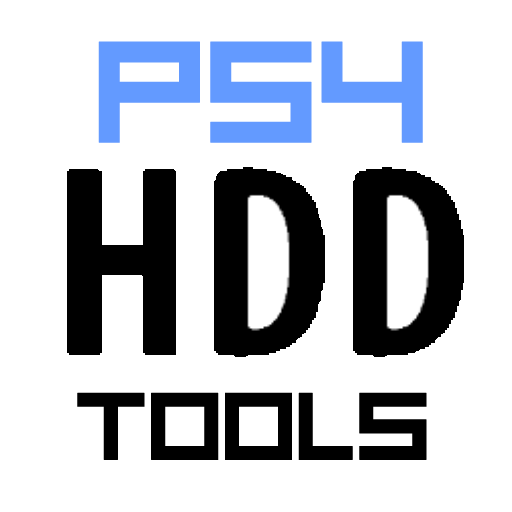
<style>
.page{position:relative;width:512px;height:512px;background:#ffffff}
.page>*{position:absolute;margin:0}
.t1{font:160.4px "RSMicro";letter-spacing:-0.02em;color:#639aff;font-weight:bold}
.t2{font:106.3px "RSMicro";letter-spacing:-0.02em;color:#000000;font-weight:bold}
</style>
<div class="page">
<p class="t1" style="left:98px;top:41px;width:325px;height:102px">PS4</p>
<p class="t2" style="left:77px;top:392px;width:350px;height:68px">TOOLS</p>
</div>
